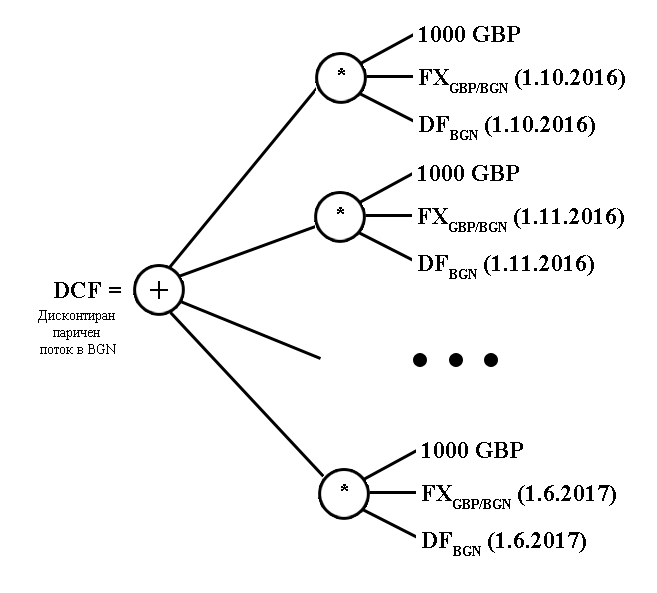
<style>
.page{position:relative;width:657px;height:593px;background:#ffffff}
.page>*{position:absolute;margin:0}
.t1{font:24px "TimesNewRomanPS-BoldMT";color:#000000}
.t2{font:14px "TimesNewRomanPSMT";color:#000000}
</style>
<div class="page">
<p class="t1" style="left:419px;top:26px;width:101px;height:16px">1000 GBP</p>
<p class="t1" style="left:419px;top:69px;width:206px;height:24px">FXGBP/BGN (1.10.2016)</p>
<p class="t1" style="left:419px;top:116px;width:176px;height:24px">DFBGN (1.10.2016)</p>
<p class="t1" style="left:418px;top:165px;width:101px;height:16px">1000 GBP</p>
<p class="t1" style="left:418px;top:208px;width:206px;height:24px">FXGBP/BGN (1.11.2016)</p>
<p class="t1" style="left:418px;top:255px;width:176px;height:24px">DFBGN (1.11.2016)</p>
<p class="t1" style="left:54px;top:282px;width:67px;height:16px">DCF =</p>
<p class="t2" style="left:38px;top:310px;width:78px;height:44px;text-align:center">Дисконтиран <br>паричен <br>поток в BGN</p>
<p class="t1" style="left:422px;top:442px;width:101px;height:16px">1000 GBP</p>
<p class="t1" style="left:422px;top:485px;width:194px;height:24px">FXGBP/BGN (1.6.2017)</p>
<p class="t1" style="left:422px;top:532px;width:164px;height:24px">DFBGN (1.6.2017)</p>
</div>
